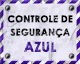
<style>
.page{position:relative;width:80px;height:64px}
.page>*{position:absolute;margin:0}
.t1{font:9.3px/13.3px "CenturyGothic-Bold";letter-spacing:0.005em;text-transform:uppercase;font-weight:bold}
.t2{font:13.3px/16px "CenturyGothic-Bold";letter-spacing:0.005em;text-transform:uppercase;font-weight:bold}
</style>
<div class="page">
<p class="t1" style="left:7px;top:15px;width:66px;height:37px;text-align:center">CONTROLE DE<br>SEGURANÇA<br><span class="t2">AZUL</span></p>
</div>
